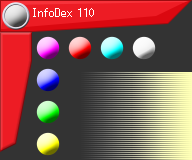
<style>
.page{position:relative;width:192px;height:160px;background:#333333}
.page>*{position:absolute;margin:0}
.t1{font:16px "PokemonDPPt";color:#fefefe}
</style>
<div class="page">
<p class="t1" style="left:33px;top:8px;width:61px;height:9px">InfoDex 110</p>
</div>
